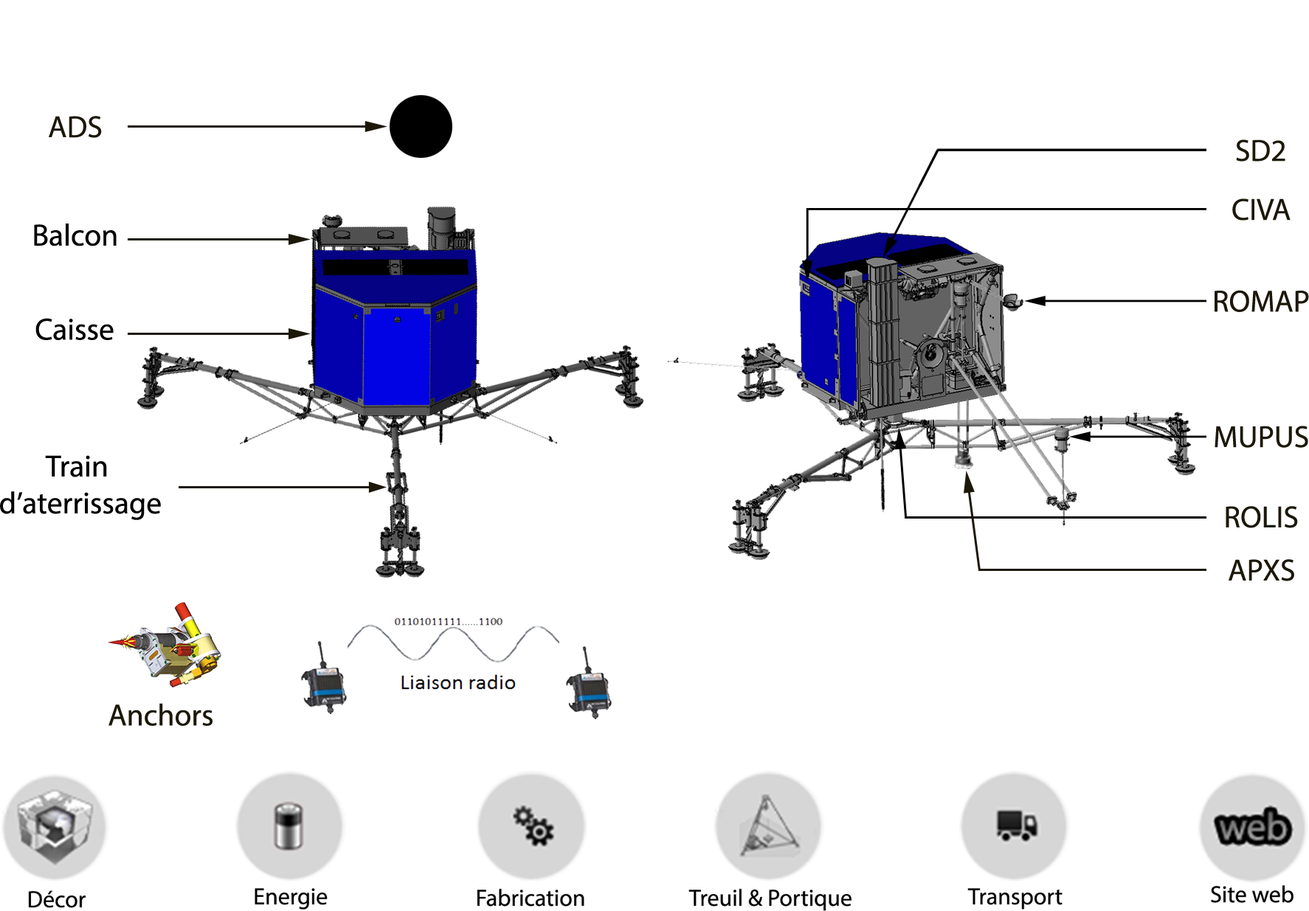
<style>
.page{position:relative;width:1309px;height:911px;background:#ffffff}
.page>*{position:absolute;margin:0}
.t1{font:30.7px "MyriadPro-Regular";color:#1c1808}
.t2{font:30.7px "MyriadPro-Regular";color:#000000}
</style>
<div class="page">
<p class="t1" style="left:49px;top:116px;width:53px;height:22px">ADS</p>
<p class="t1" style="left:1236px;top:139px;width:49px;height:23px">SD2</p>
<p class="t1" style="left:1232px;top:198px;width:58px;height:23px">CIVA</p>
<p class="t2" style="left:34px;top:224px;width:83px;height:22px">Balcon</p>
<p class="t1" style="left:1214px;top:290px;width:95px;height:22px">ROMAP</p>
<p class="t2" style="left:35px;top:318px;width:79px;height:22px">Caisse</p>
<p class="t1" style="left:1214px;top:426px;width:94px;height:22px">MUPUS</p>
<p class="t2" style="left:0px;top:455px;width:161px;height:65px;text-align:center">Train <br>d’aterrissage</p>
<p class="t1" style="left:1225px;top:506px;width:73px;height:22px">ROLIS</p>
<p class="t1" style="left:1228px;top:559px;width:66px;height:22px">APXS</p>
<p class="t1" style="left:108px;top:703px;width:104px;height:23px">Anchors</p>
</div>
